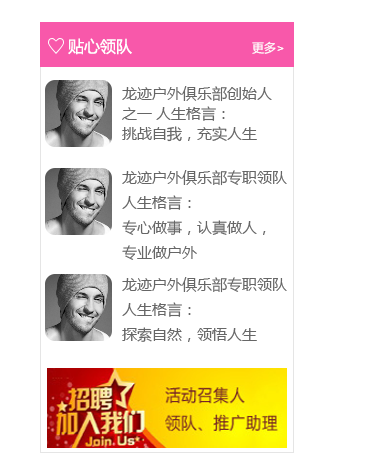
<style>
.page{position:relative;width:384px;height:453px;background:#ffffff}
.page>*{position:absolute;margin:0}
.t1{font:16px "MicrosoftYaHei";color:#ffffff}
.t2{font:12px "MicrosoftYaHei";color:#ffffff}
.t3{font:15px/20px "MicrosoftYaHei";color:#666666}
.t4{font:15px/25px "MicrosoftYaHei";color:#666666}
</style>
<div class="page">
<p class="t1" style="left:68px;top:38px;width:64px;height:17px">贴心领队</p>
<p class="t2" style="left:252px;top:41px;width:32px;height:13px">更多&gt;</p>
<p class="t3" style="left:122px;top:86px;width:150px;height:56px">龙迹户外俱乐部创始人<br>之一 人生格言：<br>挑战自我，充实人生</p>
<p class="t4" style="left:122px;top:170px;width:165px;height:90px">龙迹户外俱乐部专职领队 <br>人生格言： <br>专心做事，认真做人，<br>专业做户外</p>
<p class="t4" style="left:122px;top:277px;width:165px;height:65px">龙迹户外俱乐部专职领队 <br>人生格言： <br>探索自然，领悟人生</p>
</div>
